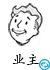
<style>
.page{position:relative;width:50px;height:70px;background:#ffffff}
.page>*{position:absolute;margin:0}
.t1{font:14px "STKaiti";color:#000000}
</style>
<div class="page">
<p class="t1" style="left:12px;top:54px;width:27px;height:11px">业主</p>
</div>
